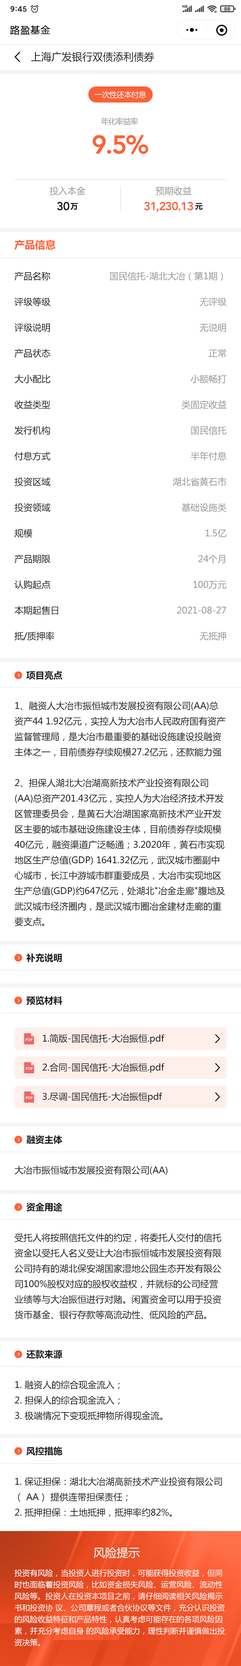
<style>
.page{position:relative;width:241px;height:1666px;background:#ffffff}
.page>*{position:absolute;margin:0}
.t1{font:9.6px "MicrosoftYaHei";letter-spacing:0.05em;color:#000000}
.t2{font:10.3px "MicrosoftYaHei";color:#1b1b1b}
.t3{font:7.7px "MicrosoftYaHei";letter-spacing:-0.05em;color:#ffffff}
.t4{font:7.7px "MicrosoftYaHei";letter-spacing:-0.05em;color:#959595}
.t5{font:25.7px "AvenirLTStd-Heavy";letter-spacing:-0.05em;color:#fd6036}
.t6{font:9px "MicrosoftYaHei";color:#959595}
.t7{font:11.6px "AvenirLTStd-Heavy";letter-spacing:-0.05em;color:#1b1b1b}
.t8{font:7.7px "MicrosoftYaHei-Bold";letter-spacing:-0.05em;color:#1b1b1b}
.t9{font:11.6px "AvenirLTStd-Heavy";letter-spacing:-0.05em;color:#fd6036}
.t10{font:10.3px "MicrosoftYaHei-Bold";color:#fd6036}
.t11{font:9px/25.7px "MicrosoftYaHei";color:#1b1b1b}
.t12{font:9px/25.7px "MicrosoftYaHei";color:#959595}
.t13{font:9px "MicrosoftYaHei-Bold";color:#1b1b1b}
.t14{font:9px/15.4px "MicrosoftYaHei";color:#1b1b1b}
.t15{font:9px "MicrosoftYaHei";color:#1b1b1b}
.t16{font:11.6px "MicrosoftYaHei";color:#ffffff}
.t17{font:7.7px/11.6px "MicrosoftYaHei";color:#ffffff}
</style>
<div class="page">
<p class="t1" style="left:10px;top:25px;width:40px;height:10px">路盈基金</p>
<p class="t2" style="left:31px;top:52px;width:123px;height:10px">上海广发银行双债添利债券</p>
<p class="t3" style="left:95px;top:91px;width:52px;height:8px">一次性还本付息</p>
<p class="t4" style="left:101px;top:117px;width:37px;height:8px">年化率益率</p>
<p class="t5" style="left:93px;top:134px;width:55px;height:21px">9.5%</p>
<p class="t6" style="left:50px;top:186px;width:36px;height:9px">投入本金</p>
<p class="t6" style="left:156px;top:186px;width:36px;height:9px">预期收益</p>
<p class="t7" style="left:57px;top:202px;width:12px;height:9px">30</p>
<p class="t8" style="left:70px;top:203px;width:8px;height:7px">万</p>
<p class="t9" style="left:144px;top:202px;width:49px;height:10px">31,230.13</p>
<p class="t8" style="left:195px;top:203px;width:8px;height:7px">元</p>
<p class="t10" style="left:14px;top:240px;width:42px;height:10px">产品信息</p>
<p class="t11" style="left:14px;top:272px;width:44px;height:369px">产品名称<br>评级等级<br>评级说明<br>产品状态<br>大小配比<br>收益类型<br>发行机构<br>付息方式<br>投资区域<br>投资领域<br>规模<br>产品期限<br>认购起点<br>本期起售日<br>抵/质押率</p>
<p class="t12" style="left:110px;top:272px;width:117px;height:369px;text-align:right">国民信托-湖北大冶（第1期）<br>无评级<br>无说明<br>正常<br>小额畅打<br>类固定收益<br>国民信托<br>半年付息<br>湖北省黄石市<br>基础设施类<br>1.5亿<br>24个月<br>100万元<br>2021-08-27<br>无抵押</p>
<p class="t13" style="left:26px;top:671px;width:36px;height:9px">项目亮点</p>
<p class="t14" style="left:14px;top:701px;width:212px;height:225px">1、融资人大冶市振恒城市发展投资有限公司(AA)总资产44 1.92亿元，实控人为大冶市人民政府国有资产监督管理局，是大冶市最重要的基础设施建设投融资主体之一，目前债券存续规模27.2亿元，还款能力强<br><br>2、担保人湖北大冶湖高新技术产业投资有限公司(AA)总资产201.43亿元，实控人为大冶经济技术开发区管理委员会，是黄石大冶湖国家高新技术产业开发区主要的城市基础设施建设主体，目前债券存续规模40亿元，融资渠道广泛畅通；3.2020年，黄石市实现地区生产总值(GDP) 1641.32亿元，武汉城市圈副中心城市，长江中游城市群重要成员，大冶市实现地区生产总值(GDP)约647亿元，处湖北"冶金走廊"腹地及武汉城市经济圈内，是武汉城市圈冶金建材走廊的重要支点。</p>
<p class="t13" style="left:26px;top:953px;width:36px;height:10px">补充说明</p>
<p class="t13" style="left:26px;top:996px;width:36px;height:9px">预览材料</p>
<p class="t15" style="left:43px;top:1034px;width:122px;height:10px">1.简版-国民信托-大冶振恒.pdf</p>
<p class="t15" style="left:42px;top:1063px;width:123px;height:10px">2.合同-国民信托-大冶振恒.pdf</p>
<p class="t15" style="left:43px;top:1092px;width:119px;height:10px">3.尽调-国民信托-大冶振恒pdf</p>
<p class="t13" style="left:27px;top:1135px;width:35px;height:9px">融资主体</p>
<p class="t15" style="left:14px;top:1166px;width:153px;height:9px">大冶市振恒城市发展投资有限公司(AA)</p>
<p class="t13" style="left:26px;top:1203px;width:36px;height:9px">资金用途</p>
<p class="t14" style="left:14px;top:1233px;width:207px;height:86px">受托人将按照信托文件的约定，将委托人交付的信托资金以受托人名义受让大冶市振恒城市发展投资有限公司持有的湖北保安湖国家湿地公园生态开发有限公司100%股权对应的股权收益权，并就标的公司经营业绩等与大冶振恒进行对赌。闲置资金可以用于投资货币基金、银行存款等高流动性、低风险的产品。</p>
<p class="t13" style="left:26px;top:1350px;width:36px;height:9px">还款来源</p>
<p class="t14" style="left:15px;top:1381px;width:148px;height:39px">1. 融资人的综合现金流入；<br>2. 担保人的综合现金流入；<br>3. 极端情况下变现抵押物所得现金流。</p>
<p class="t13" style="left:26px;top:1447px;width:36px;height:9px">风控措施</p>
<p class="t14" style="left:15px;top:1477px;width:207px;height:40px">1. 保证担保：湖北大冶湖高新技术产业投资有限公司（ AA） 提供连带担保责任；<br>2. 抵押担保：土地抵押，抵押率约82%。</p>
<p class="t16" style="left:94px;top:1547px;width:46px;height:12px">风险提示</p>
<p class="t17" style="left:14px;top:1569px;width:211px;height:78px">投资有风险，当投资人进行投资时，可能获得投资收益，但同时也面临着投资风险，比如资金损失风险、运营风险、流动性风险等。投资人在投资本项目之前，请仔细阅读相关风险揭示书和投资协 议、公司章程或者合伙协议等文件，充分认识投资的风险收益特征和产品特性，认真考虑可能存在的各项风险因素，并充分考虑自身 的风险承受能力，理性判断并谨慎做出投资决策。</p>
</div>
